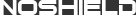
<style>
.page{position:relative;width:136px;height:15px;background:#ffffff}
.page>*{position:absolute;margin:0}
.t1{font:30px "Bitsumishi";color:#ffffff}
</style>
<div class="page">
<p class="t1" style="left:0px;top:0px;width:136px;height:15px">noShield</p>
</div>
